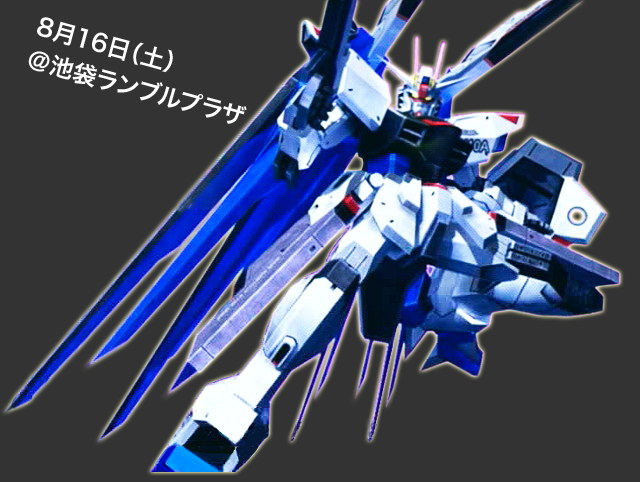
<style>
.page{position:relative;width:640px;height:482px;background:#333333}
.page>*{position:absolute;margin:0}
.t1{font:24px/34px "HiraKakuPro-W6";color:#ffffff}
</style>
<div class="page">
<p class="t1" style="left:28px;top:17px;width:219px;height:107px;rotate:15deg">8月16日（土）<br>＠池袋ランブルプラザ</p>
</div>
